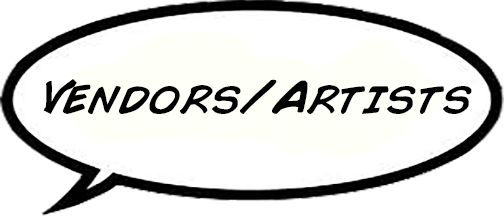
<style>
.page{position:relative;width:504px;height:216px;background:#ffffff}
.page>*{position:absolute;margin:0}
.t1{font:48px "ComicBook-Italic";color:#000000}
</style>
<div class="page">
<p class="t1" style="left:43px;top:79px;width:429px;height:35px">Vendors/Artists<br>A</p>
</div>
